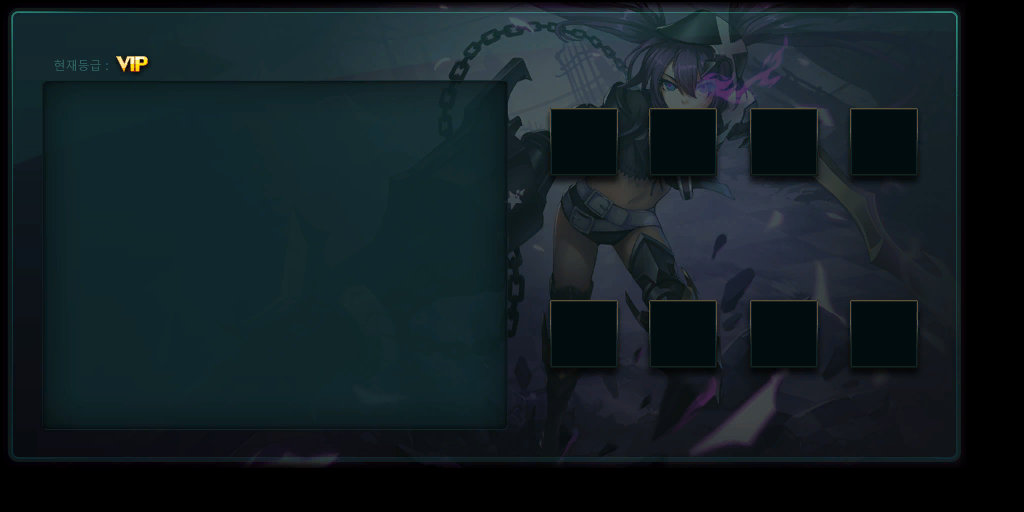
<style>
.page{position:relative;width:1024px;height:512px}
.page>*{position:absolute;margin:0}
.t1{font:12px "MalgunGothicRegular";color:#316563}
</style>
<div class="page">
<p class="t1" style="left:54px;top:59px;width:47px;height:12px">현재등급</p>
</div>
